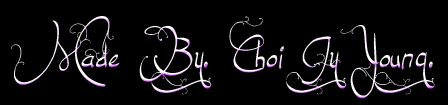
<style>
.page{position:relative;width:448px;height:105px;background:#000000}
.page>*{position:absolute;margin:0}
.t1{font:70px "Jellyka,-End_less-Voyage";color:#ffffff}
</style>
<div class="page">
<p class="t1" style="left:11px;top:16px;width:424px;height:83px">Made By. Choi Jy Young.</p>
</div>
